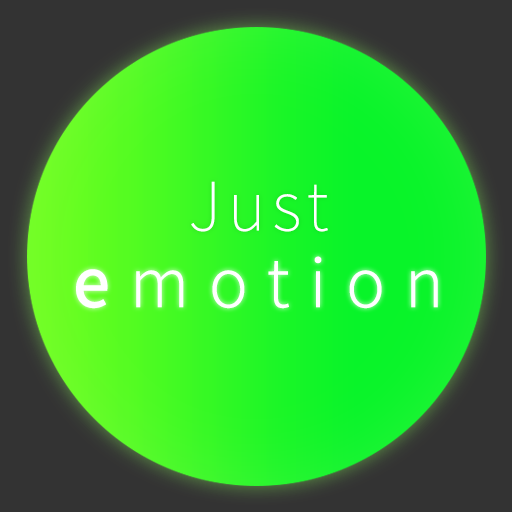
<style>
.page{position:relative;width:512px;height:512px;background:#333333}
.page>*{position:absolute;margin:0}
.t1{font:67.1px "NotoSansCJKkr-Thin";letter-spacing:0.1em;color:#ffffff}
.t2{font:67.1px "NotoSansCJKkr-Light";letter-spacing:0.3em;color:#ffffff}
.t3{font:67.1px "NotoSansCJKkr-Medium";letter-spacing:0.3em;color:#ffffff}
</style>
<div class="page">
<p class="t1" style="left:191px;top:181px;width:137px;height:51px">Just</p>
<p class="t2" style="left:76px;top:256px;width:362px;height:53px"><span class="t1"><br></span><span class="t3">e</span>motion</p>
</div>
